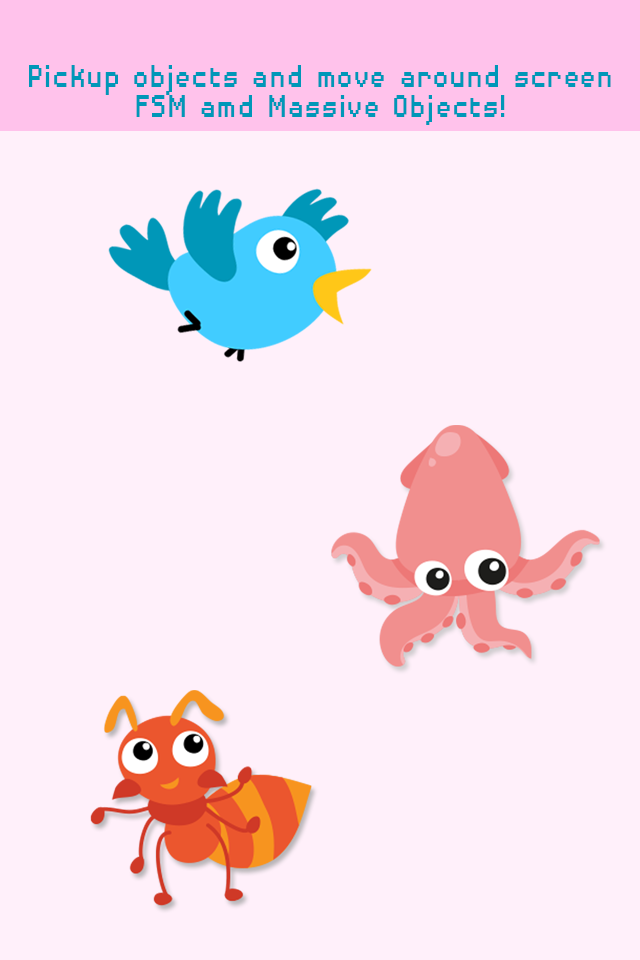
<style>
.page{position:relative;width:640px;height:960px;background:#fff0fa}
.page>*{position:absolute;margin:0}
.t1{font:42.3px/30px "DisposableDroidBB";color:#0097b8;scale:0.83 1}
</style>
<div class="page">
<p class="t1" style="left:29px;top:65px;width:582px;height:60px;text-align:center">Pickup objects and move around screen<br>FSM amd Massive Objects!</p>
</div>
